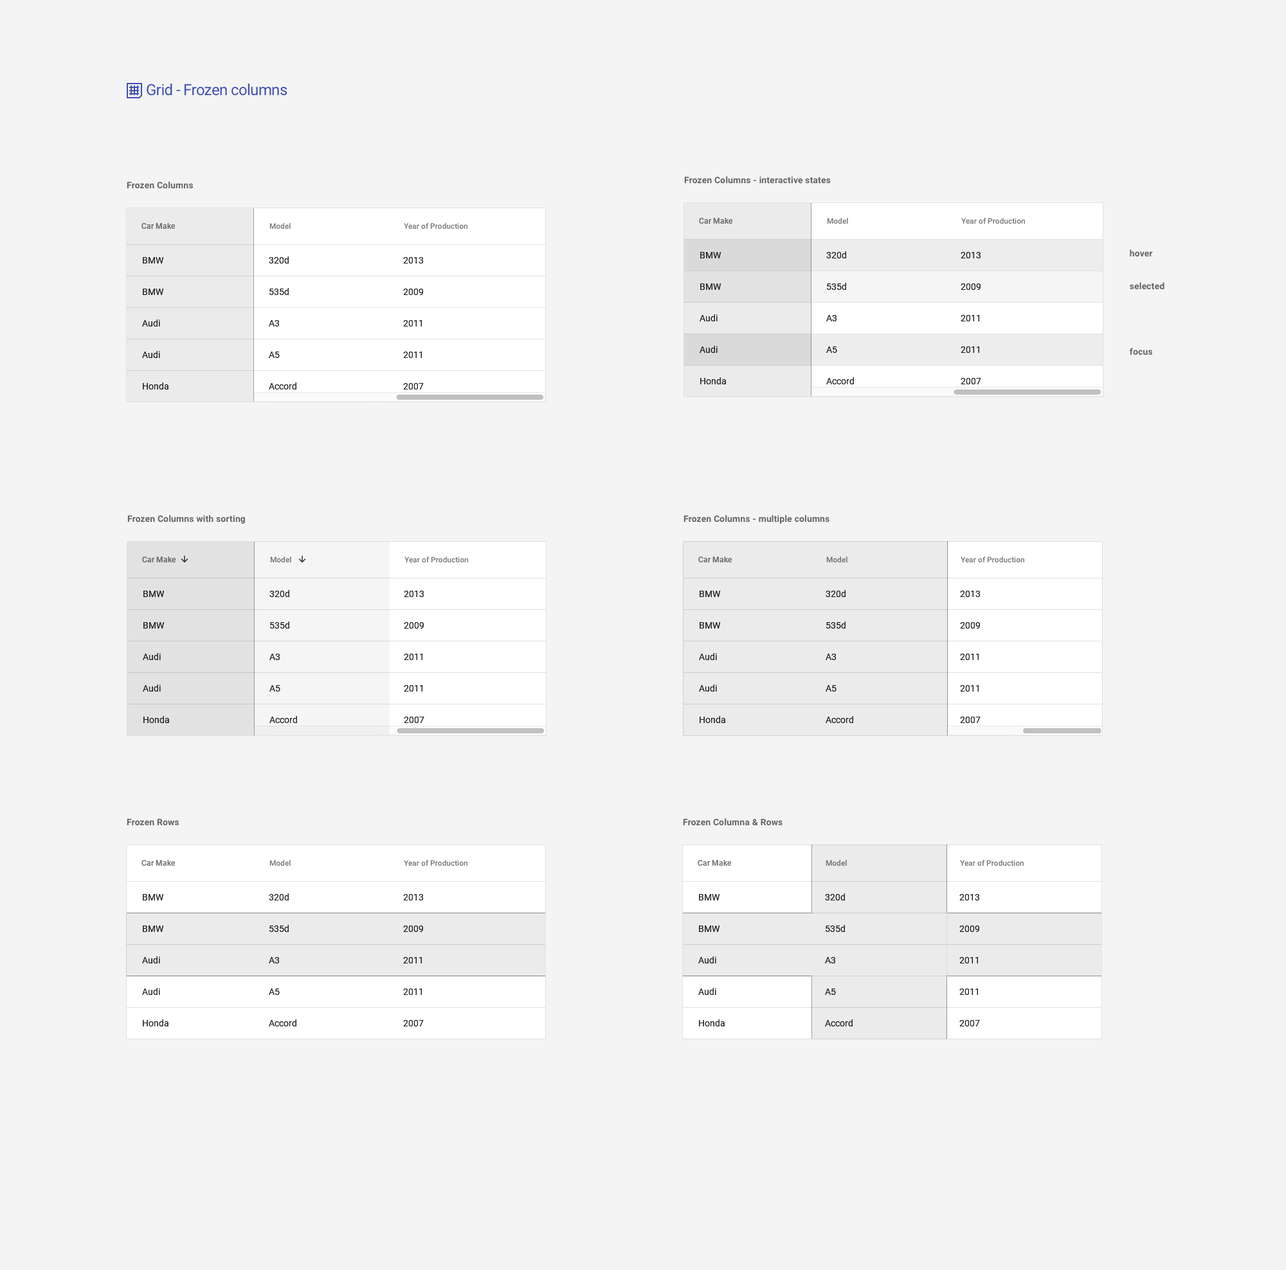
<style>
.page{position:relative;width:1286px;height:1270px;background:#f4f4f4}
.page>*{position:absolute;margin:0}
.t1{font:15.4px "Roboto-Regular";letter-spacing:-0.025em;color:#3f51b5}
.t2{font:9px "Roboto-Bold";letter-spacing:0.01em;color:#656565}
.t3{font:7.7px "Roboto-Medium";color:#6c6c6c}
.t4{font:7.7px "Roboto-Medium";color:#757575}
.t5{font:9px/31.5px "Roboto-Regular";color:#1e1e1e}
.t6{font:9px/31.5px "Roboto-Regular";color:#212121}
.t7{font:9px/31.5px "Roboto-Regular";color:#1d1d1d}
.t8{font:9px/31.5px "Roboto-Regular";color:#202020}
.t9{font:9px/32.8px "Roboto-Bold";letter-spacing:0.01em;color:#656565}
.t10{font:7.7px "Roboto-Medium";color:#686868}
.t11{font:7.7px "Roboto-Medium";color:#707070}
</style>
<div class="page">
<p class="t1" style="left:147px;top:84px;width:140px;height:12px">Grid - Frozen columns</p>
<p class="t2" style="left:127px;top:181px;width:66px;height:8px">Frozen Columns</p>
<p class="t2" style="left:684px;top:176px;width:147px;height:8px">Frozen Columns - interactive states</p>
<p class="t3" style="left:699px;top:218px;width:33px;height:6px">Car Make</p>
<p class="t4" style="left:827px;top:218px;width:21px;height:6px">Model</p>
<p class="t4" style="left:961px;top:217px;width:64px;height:7px">Year of Production</p>
<p class="t3" style="left:141px;top:223px;width:34px;height:6px">Car Make</p>
<p class="t4" style="left:269px;top:223px;width:22px;height:7px">Model</p>
<p class="t4" style="left:404px;top:222px;width:63px;height:8px">Year of Production</p>
<p class="t5" style="left:142px;top:257px;width:26px;height:133px">BMW<br>BMW<br>Audi<br>Audi<br>Honda</p>
<p class="t6" style="left:269px;top:256px;width:27px;height:134px">320d<br>535d<br>A3<br>A5<br>Accord</p>
<p class="t6" style="left:403px;top:257px;width:21px;height:133px">2013<br>2009<br>2011<br>2011<br>2007</p>
<p class="t7" style="left:699px;top:252px;width:27px;height:132px">BMW<br>BMW<br>Audi<br>Audi<br>Honda</p>
<p class="t8" style="left:826px;top:251px;width:28px;height:133px">320d<br>535d<br>A3<br>A5<br>Accord</p>
<p class="t8" style="left:960px;top:252px;width:21px;height:132px">2013<br>2009<br>2011<br>2011<br>2007</p>
<p class="t9" style="left:1129px;top:249px;width:35px;height:107px">hover<br>selected<br><br>focus</p>
<p class="t2" style="left:127px;top:515px;width:118px;height:9px">Frozen Columns with sorting</p>
<p class="t2" style="left:683px;top:515px;width:146px;height:9px">Frozen Columns - multiple columns</p>
<p class="t10" style="left:142px;top:557px;width:34px;height:5px">Car Make</p>
<p class="t11" style="left:270px;top:557px;width:21px;height:6px">Model</p>
<p class="t4" style="left:404px;top:556px;width:64px;height:7px">Year of Production</p>
<p class="t3" style="left:698px;top:557px;width:34px;height:5px">Car Make</p>
<p class="t3" style="left:826px;top:557px;width:21px;height:6px">Model</p>
<p class="t4" style="left:960px;top:556px;width:64px;height:7px">Year of Production</p>
<p class="t7" style="left:143px;top:591px;width:26px;height:132px">BMW<br>BMW<br>Audi<br>Audi<br>Honda</p>
<p class="t8" style="left:269px;top:590px;width:28px;height:133px">320d<br>535d<br>A3<br>A5<br>Accord</p>
<p class="t6" style="left:404px;top:591px;width:20px;height:132px">2013<br>2009<br>2011<br>2011<br>2007</p>
<p class="t5" style="left:699px;top:591px;width:26px;height:132px">BMW<br>BMW<br>Audi<br>Audi<br>Honda</p>
<p class="t5" style="left:825px;top:590px;width:28px;height:133px">320d<br>535d<br>A3<br>A5<br>Accord</p>
<p class="t6" style="left:960px;top:591px;width:20px;height:132px">2013<br>2009<br>2011<br>2011<br>2007</p>
<p class="t2" style="left:127px;top:819px;width:52px;height:7px">Frozen Rows</p>
<p class="t2" style="left:683px;top:818px;width:99px;height:8px">Frozen Columna &amp; Rows</p>
<p class="t4" style="left:141px;top:860px;width:34px;height:6px">Car Make</p>
<p class="t4" style="left:269px;top:860px;width:22px;height:7px">Model</p>
<p class="t4" style="left:404px;top:860px;width:63px;height:7px">Year of Production</p>
<p class="t4" style="left:698px;top:860px;width:33px;height:6px">Car Make</p>
<p class="t3" style="left:825px;top:860px;width:22px;height:7px">Model</p>
<p class="t4" style="left:960px;top:860px;width:63px;height:7px">Year of Production</p>
<p class="t6" style="left:269px;top:894px;width:27px;height:133px">320d<br>535d<br>A3<br>A5<br>Accord</p>
<p class="t5" style="left:825px;top:894px;width:27px;height:133px">320d<br>535d<br>A3<br>A5<br>Accord</p>
<p class="t6" style="left:142px;top:894px;width:26px;height:133px">BMW<br>BMW<br>Audi<br>Audi<br>Honda</p>
<p class="t6" style="left:403px;top:894px;width:21px;height:133px">2013<br>2009<br>2011<br>2011<br>2007</p>
<p class="t6" style="left:698px;top:894px;width:26px;height:133px">BMW<br>BMW<br>Audi<br>Audi<br>Honda</p>
<p class="t6" style="left:959px;top:894px;width:21px;height:133px">2013<br>2009<br>2011<br>2011<br>2007</p>
</div>
